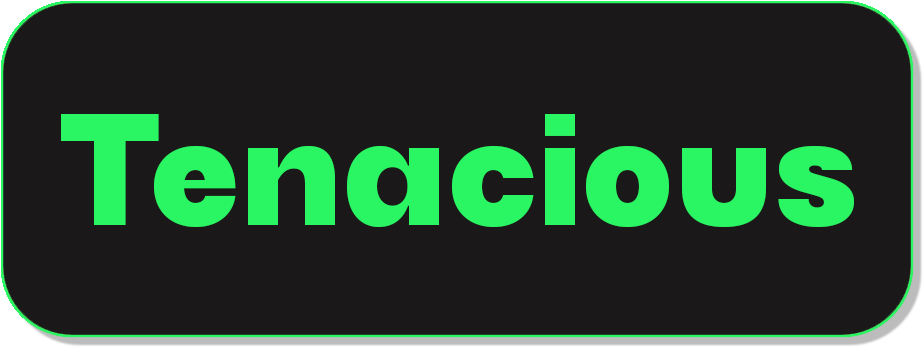
<style>
.page{position:relative;width:924px;height:348px;background:#1a1818}
.page>*{position:absolute;margin:0}
.t1{font:150px "FONTSPRINGDEMO-TGHaidoGroteskBlackRegular";color:#2af563}
</style>
<div class="page">
<p class="t1" style="left:61px;top:114px;width:793px;height:113px">Tenacious</p>
</div>
